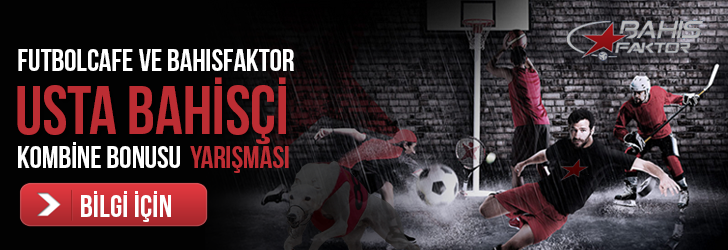
<style>
.page{position:relative;width:728px;height:250px}
.page>*{position:absolute;margin:0}
.t1{font:31px "BebasNeue";color:#ffffff;text-transform:uppercase}
.t2{font:68px "BebasNeue";color:#bc2d33;text-transform:uppercase}
.t3{font:31px "BebasNeue";color:#bd2d33;text-transform:uppercase}
.t4{font:31px "BebasNeue";letter-spacing:0.01em;color:#ffffff;text-transform:uppercase}
</style>
<div class="page">
<p class="t1" style="left:18px;top:49px;width:276px;height:22px">Futbolcafe ve Bahisfaktor</p>
<p class="t2" style="left:17px;top:77px;width:269px;height:67px">usta bahİSÇİ</p>
<p class="t1" style="left:18px;top:142px;width:162px;height:26px">KOMBİNE BONUSU</p>
<p class="t3" style="left:190px;top:146px;width:99px;height:27px">YARIŞMASI</p>
<p class="t4" style="left:81px;top:191px;width:90px;height:31px">BİLGİ İÇİN</p>
</div>
